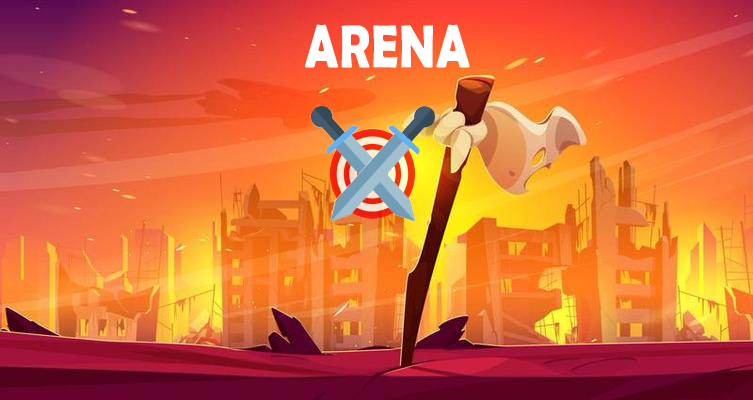
<style>
.page{position:relative;width:753px;height:400px}
.page>*{position:absolute;margin:0}
.t1{font:61px "BerlinSansFBDemi-Bold";letter-spacing:0.025em;color:#ffffff;scale:0.79 1}
</style>
<div class="page">
<p class="t1" style="left:305px;top:24px;width:165px;height:44px">ARENA</p>
</div>
